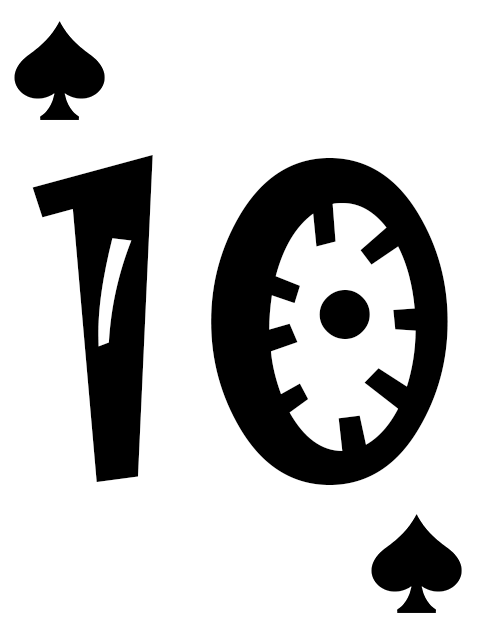
<style>
.page{position:relative;width:480px;height:640px;background:#ffffff}
.page>*{position:absolute;margin:0}
.t1{font:386.3px "Jokerman-Regular";color:#000000}
</style>
<div class="page">
<p class="t1" style="left:32px;top:155px;width:416px;height:330px">10</p>
</div>
